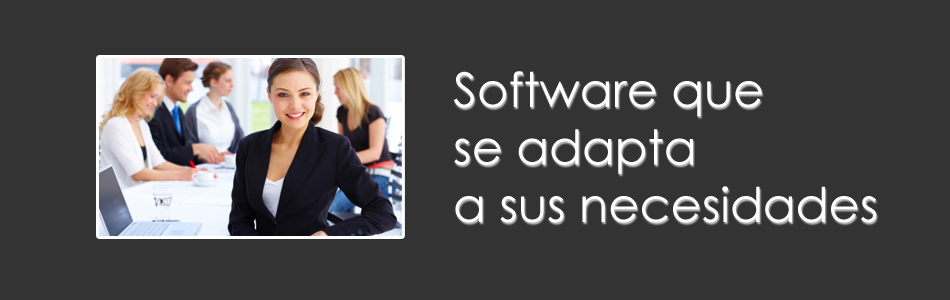
<style>
.page{position:relative;width:950px;height:300px;background:#333333}
.page>*{position:absolute;margin:0}
.t1{font:48px "CenturyGothic";color:#ffffff}
</style>
<div class="page">
<p class="t1" style="left:453px;top:71px;width:424px;height:152px">Software que <br>se adapta<br>a sus necesidades</p>
</div>
